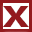
<style>
.page{position:relative;width:32px;height:32px;background:#931a1e}
.page>*{position:absolute;margin:0}
.t1{font:30px "MyriadPro-Bold";color:#931a1e;scale:1.5 1}
</style>
<div class="page">
<p class="t1" style="left:2px;top:6px;width:27px;height:21px">X</p>
</div>
